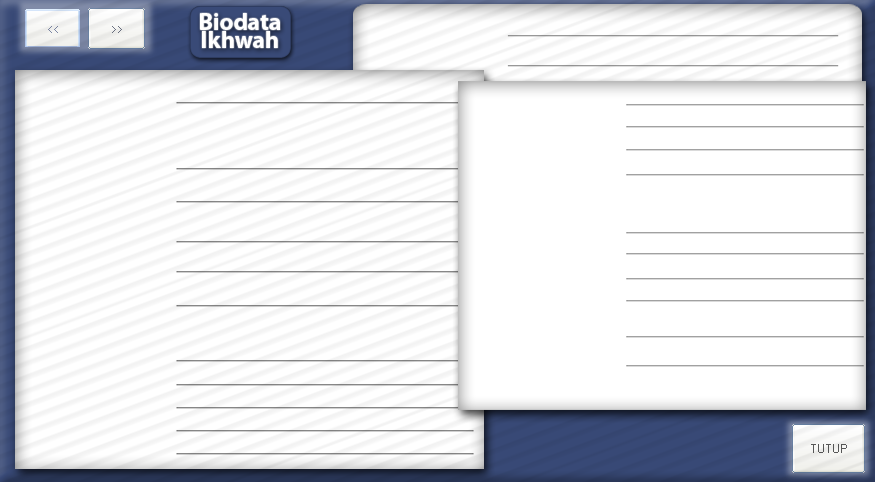
<style>
.page{position:relative;width:875px;height:482px;background:#ffffff}
.page>*{position:absolute;margin:0}
.t1{font:24px/18px "MyriadPro-Bold";color:#ffffff}
</style>
<div class="page">
<p class="t1" style="left:200px;top:13px;width:81px;height:35px;text-align:center">Biodata<br>Ikhwah</p>
</div>
